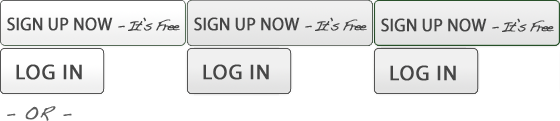
<style>
.page{position:relative;width:560px;height:121px;background:#ffffff}
.page>*{position:absolute;margin:0}
.t1{font:18px "MyriadPro-Regular";color:#464646;font-weight:bold;scale:0.96 1}
.t2{font:14px "Handwriting-Dakota";letter-spacing:-0.128em;color:#464646;font-weight:bold;scale:0.96 1}
.t3{font:14px "Handwriting-Dakota";letter-spacing:-0.128em;color:#464646;font-weight:bold}
.t4{font:21px "MyriadPro-Regular";letter-spacing:0.04em;color:#464646;font-weight:bold}
.t5{font:17px "Handwriting-Dakota";letter-spacing:0.04em;color:#5f5f5f;font-weight:bold}
</style>
<div class="page">
<p class="t1" style="left:7px;top:17px;width:173px;height:14px">SIGN UP NOW<span class="t2"> - </span><span class="t3">It’s Free</span></p>
<p class="t1" style="left:194px;top:17px;width:173px;height:14px">SIGN UP NOW<span class="t2"> - </span><span class="t3">It’s Free</span></p>
<p class="t1" style="left:381px;top:18px;width:173px;height:14px">SIGN UP NOW<span class="t2"> - </span><span class="t3">It’s Free</span></p>
<p class="t4" style="left:16px;top:64px;width:66px;height:16px">LOG IN</p>
<p class="t4" style="left:203px;top:64px;width:66px;height:16px">LOG IN</p>
<p class="t4" style="left:390px;top:65px;width:66px;height:16px">LOG IN</p>
<p class="t5" style="left:7px;top:106px;width:65px;height:15px">- OR -</p>
</div>
